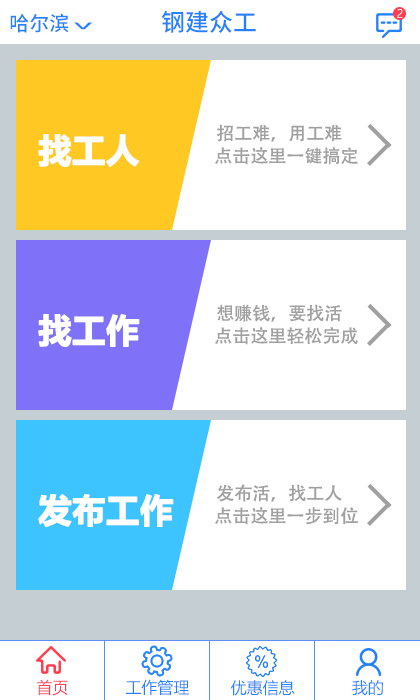
<style>
.page{position:relative;width:420px;height:700px;background:#ffffff}
.page>*{position:absolute;margin:0}
.t1{font:20px "NotoSansHans-Medium";color:#2681fc}
.t2{font:24px "NotoSansHans-Medium";color:#2681fc}
.t3{font:11px "MicrosoftYaHeiLight";color:#fcf9fa}
.t4{font:38.7px "NotoSansHans-Medium";color:#2681fc;scale:0.36 1}
.t5{font:18px "AdobeHeitiStd-Regular";color:#a0a0a0}
.t6{font:33px "MicrosoftYaHei-Bold";color:#ffffff;font-weight:bold}
.t7{font:16px "MicrosoftYaHeiLight";color:#ff3e50}
.t8{font:16px "MicrosoftYaHeiLight";color:#2681fc}
</style>
<div class="page">
<p class="t1" style="left:10px;top:13px;width:59px;height:20px">哈尔滨</p>
<p class="t2" style="left:161px;top:10px;width:95px;height:23px">钢建众工</p>
<p class="t3" style="left:397px;top:9px;width:6px;height:9px">2</p>
<p class="t4" style="left:74px;top:22px;width:19px;height:8px;rotate:90deg">&gt;</p>
<p class="t5" style="left:217px;top:124px;width:125px;height:18px">招工难，用工难</p>
<p class="t6" style="left:38px;top:134px;width:102px;height:33px">找工人</p>
<p class="t5" style="left:215px;top:147px;width:143px;height:18px">点击这里一键搞定</p>
<p class="t5" style="left:217px;top:304px;width:125px;height:18px">想赚钱，要找活</p>
<p class="t6" style="left:38px;top:314px;width:102px;height:33px">找工作</p>
<p class="t5" style="left:215px;top:327px;width:143px;height:18px">点击这里轻松完成</p>
<p class="t5" style="left:217px;top:484px;width:125px;height:18px">发布活，找工人</p>
<p class="t6" style="left:38px;top:494px;width:136px;height:34px">发布工作</p>
<p class="t5" style="left:215px;top:507px;width:143px;height:18px">点击这里一步到位</p>
<p class="t7" style="left:37px;top:679px;width:31px;height:17px">首页</p>
<p class="t8" style="left:126px;top:679px;width:63px;height:16px">工作管理</p>
<p class="t8" style="left:231px;top:680px;width:64px;height:16px">优惠信息</p>
<p class="t8" style="left:352px;top:680px;width:31px;height:16px">我的</p>
</div>
